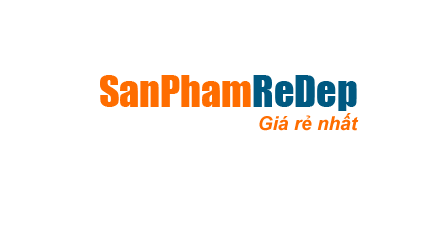
<style>
.page{position:relative;width:428px;height:230px;background:#ffffff}
.page>*{position:absolute;margin:0}
.t1{font:40px "Impact";color:#fe6d00}
.t2{font:40px "Impact";color:#005981}
.t3{font:19px "Arial-BoldItalicMT";color:#fe6d00}
</style>
<div class="page">
<p class="t1" style="left:100px;top:75px;width:257px;height:36px">SanPham<span class="t2">ReDep</span></p>
<p class="t3" style="left:259px;top:113px;width:100px;height:18px">Giá rẻ nhất</p>
</div>
